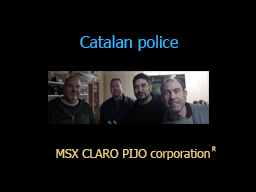
<style>
.page{position:relative;width:256px;height:192px;background:#000000}
.page>*{position:absolute;margin:0}
.t1{font:16px "Tahoma";color:#33b5ff}
.t2{font:12px "Tahoma";color:#e6ce80}
.t3{font:6px "Tahoma"}
</style>
<div class="page">
<p class="t1" style="left:80px;top:35px;width:99px;height:16px">Catalan police</p>
<p class="t2" style="left:56px;top:149px;width:154px;height:11px">MSX CLARO PIJO corporation</p>
<p class="t3" style="left:212px;top:146px;width:4px;height:6px">R</p>
</div>
